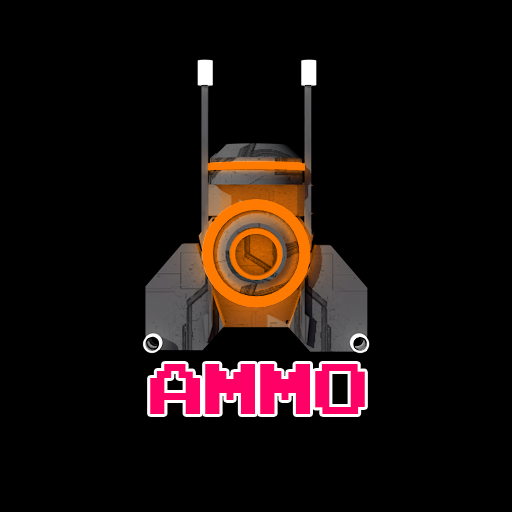
<style>
.page{position:relative;width:512px;height:512px;background:#000000}
.page>*{position:absolute;margin:0}
.t1{font:100px "ArcadeClassic";color:#ff0066}
</style>
<div class="page">
<p class="t1" style="left:150px;top:364px;width:215px;height:50px">Ammo</p>
</div>
